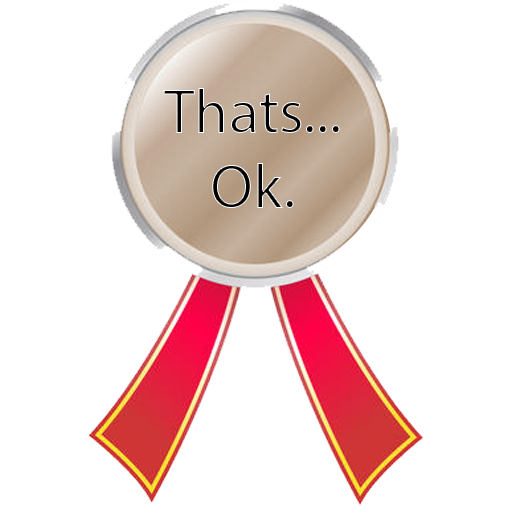
<style>
.page{position:relative;width:512px;height:512px;background:#ffffff}
.page>*{position:absolute;margin:0}
.t1{font:62.3px "MyriadPro-Regular"}
</style>
<div class="page">
<p class="t1" style="left:163px;top:88px;width:177px;height:120px;text-align:center">Thats...<br>Ok.</p>
</div>
